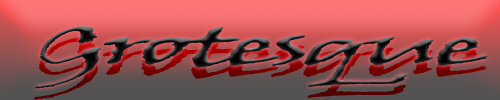
<style>
.page{position:relative;width:500px;height:100px}
.page>*{position:absolute;margin:0}
.t1{font:54.8px "VinerHandITC";letter-spacing:-0.075em;scale:2.23 1}
</style>
<div class="page">
<p class="t1" style="left:35px;top:26px;width:453px;height:63px">Grotesque</p>
</div>
